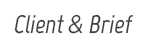
<style>
.page{position:relative;width:150px;height:39px;background:#ffffff}
.page>*{position:absolute;margin:0}
.t1{font:25.4px "Marvel-BoldItalic";color:#3e3e3e}
</style>
<div class="page">
<p class="t1" style="left:14px;top:14px;width:119px;height:20px">Client &amp; Brief</p>
</div>
